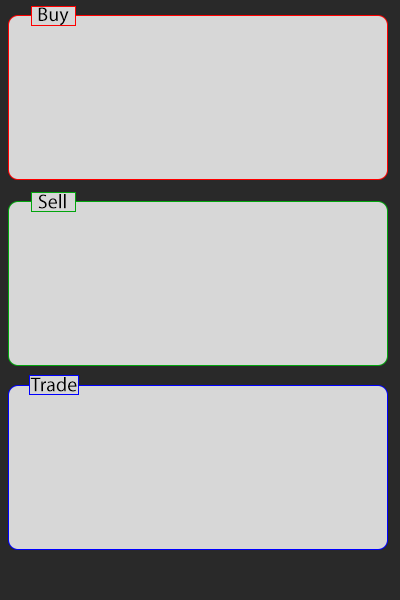
<style>
.page{position:relative;width:400px;height:600px;background:#d7d7d7}
.page>*{position:absolute;margin:0}
.t1{font:20px "MyriadPro-Regular";color:#000000}
</style>
<div class="page">
<p class="t1" style="left:38px;top:7px;width:31px;height:19px">Buy</p>
<p class="t1" style="left:38px;top:194px;width:28px;height:15px">Sell</p>
<p class="t1" style="left:30px;top:377px;width:47px;height:15px">Trade</p>
</div>
